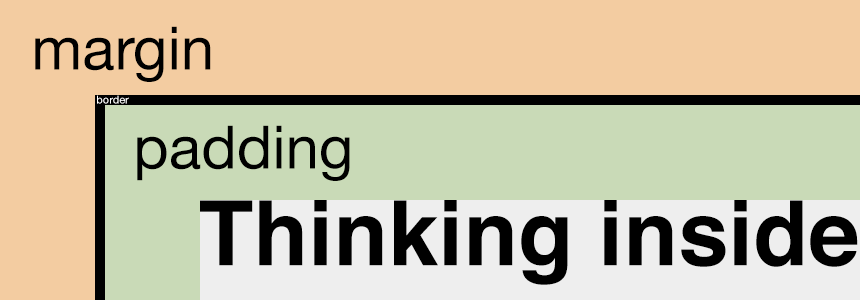
<style>
.page{position:relative;width:860px;height:300px;background:#f3cca1}
.page>*{position:absolute;margin:0}
.t1{font:60px "HelveticaNeue";color:#000000}
.t2{font:11px "HelveticaNeue";color:#ffffff}
.t3{font:90px "Helvetica-Bold";color:#000000}
</style>
<div class="page">
<p class="t1" style="left:35px;top:26px;width:176px;height:56px">margin</p>
<p class="t2" style="left:97px;top:95px;width:32px;height:9px">border</p>
<p class="t1" style="left:137px;top:125px;width:213px;height:56px">padding</p>
<p class="t3" style="left:199px;top:200px;width:659px;height:85px">Thinking inside</p>
</div>
